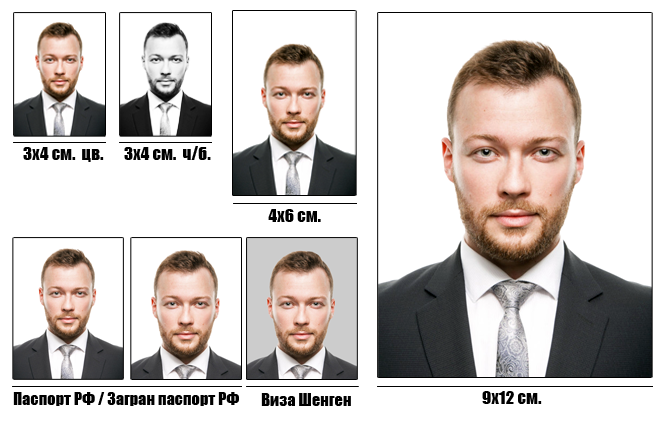
<style>
.page{position:relative;width:668px;height:422px;background:#ffffff}
.page>*{position:absolute;margin:0}
.t1{font:17.4px "Impact";color:#000000}
.t2{font:16.3px "Impact";color:#000000}
</style>
<div class="page">
<p class="t1" style="left:23px;top:147px;width:81px;height:15px">3x4 см.  цв.</p>
<p class="t1" style="left:124px;top:146px;width:87px;height:14px">3x4 см.  ч/б.</p>
<p class="t1" style="left:268px;top:209px;width:53px;height:13px">4x6 см.</p>
<p class="t2" style="left:13px;top:392px;width:226px;height:14px">Паспорт РФ / Загран паспорт РФ</p>
<p class="t2" style="left:261px;top:393px;width:90px;height:13px">Виза Шенген</p>
<p class="t1" style="left:482px;top:391px;width:60px;height:13px">9x12 см.</p>
</div>
